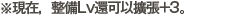
<style>
.page{position:relative;width:243px;height:15px;background:#ffffff}
.page>*{position:absolute;margin:0}
.t1{font:14px "GothicMB101Pr6N-Medium";letter-spacing:-0.075em;color:#4c4843}
</style>
<div class="page">
<p class="t1" style="left:12px;top:1px;width:172px;height:14px">現在，整備Lv還可以擴張+3。</p>
</div>
